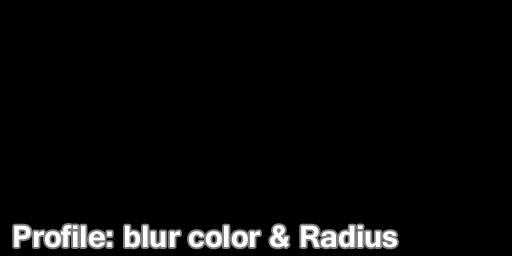
<style>
.page{position:relative;width:512px;height:256px;background:#000000}
.page>*{position:absolute;margin:0}
.t1{font:38.2px "Tunga-Bold";color:#ffffff}
</style>
<div class="page">
<p class="t1" style="left:14px;top:225px;width:383px;height:23px">Profile: blur color &amp; Radius</p>
</div>
